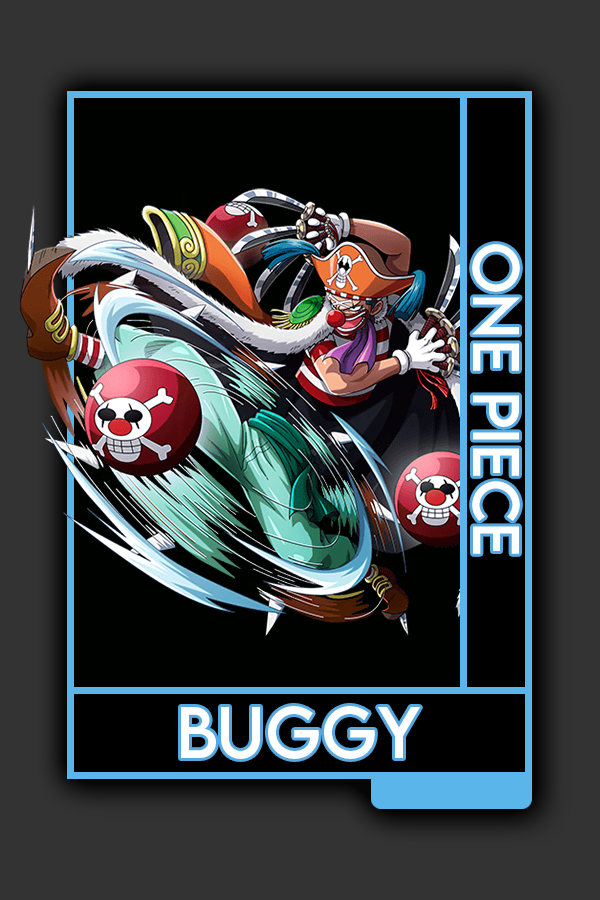
<style>
.page{position:relative;width:600px;height:900px;background:#333333}
.page>*{position:absolute;margin:0}
.t1{font:58.4px "LEMONMILK-Regular";color:#ffffff}
.t2{font:65.2px "LEMONMILK-Regular";color:#ffffff}
</style>
<div class="page">
<p class="t1" style="left:472px;top:244px;width:48px;height:310px;rotate:90deg">One Piece</p>
<p class="t2" style="left:181px;top:706px;width:239px;height:53px">Buggy</p>
</div>
